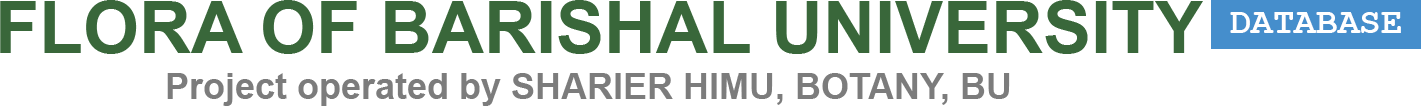
<style>
.page{position:relative;width:1421px;height:106px;background:#ffffff}
.page>*{position:absolute;margin:0}
.t1{font:72px "Arial-BoldMT";color:#39673a}
.t2{font:36px "CourierNewPS-BoldMT";color:#ffffff}
.t3{font:36px "Arial-BoldMT";color:#7c7c7c}
</style>
<div class="page">
<p class="t1" style="left:0px;top:0px;width:1203px;height:54px">FLORA OF BARISHAL UNIVERSITY</p>
<p class="t2" style="left:1230px;top:12px;width:171px;height:21px">DATABASE</p>
<p class="t3" style="left:167px;top:73px;width:843px;height:33px">Project operated by SHARIER HIMU, BOTANY, BU</p>
</div>
